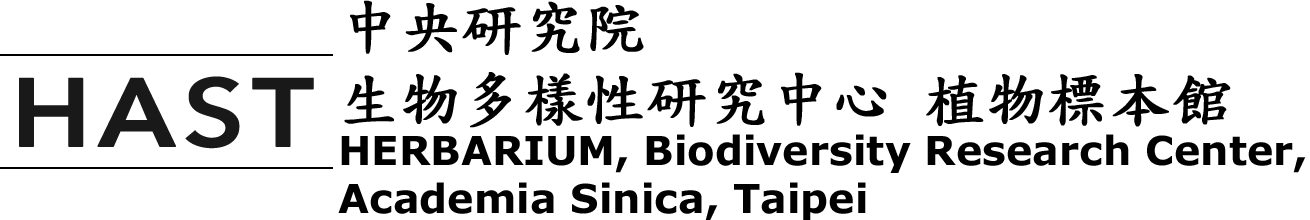
<style>
.page{position:relative;width:1310px;height:220px;background:#ffffff}
.page>*{position:absolute;margin:0}
.t1{font:40px "Verdana-Bold";color:#000000}
.t2{font:60px "DFKaiShu-SB-Estd-BF";color:#000000;font-weight:bold}
</style>
<div class="page">
<p class="t1" style="left:338px;top:0px;width:968px;height:221px"><span class="t2">中央研究院<br>生物多樣性研究中心 植物標本館<br></span>HERBARIUM, Biodiversity Research Center,<br>Academia Sinica, Taipei</p>
</div>
